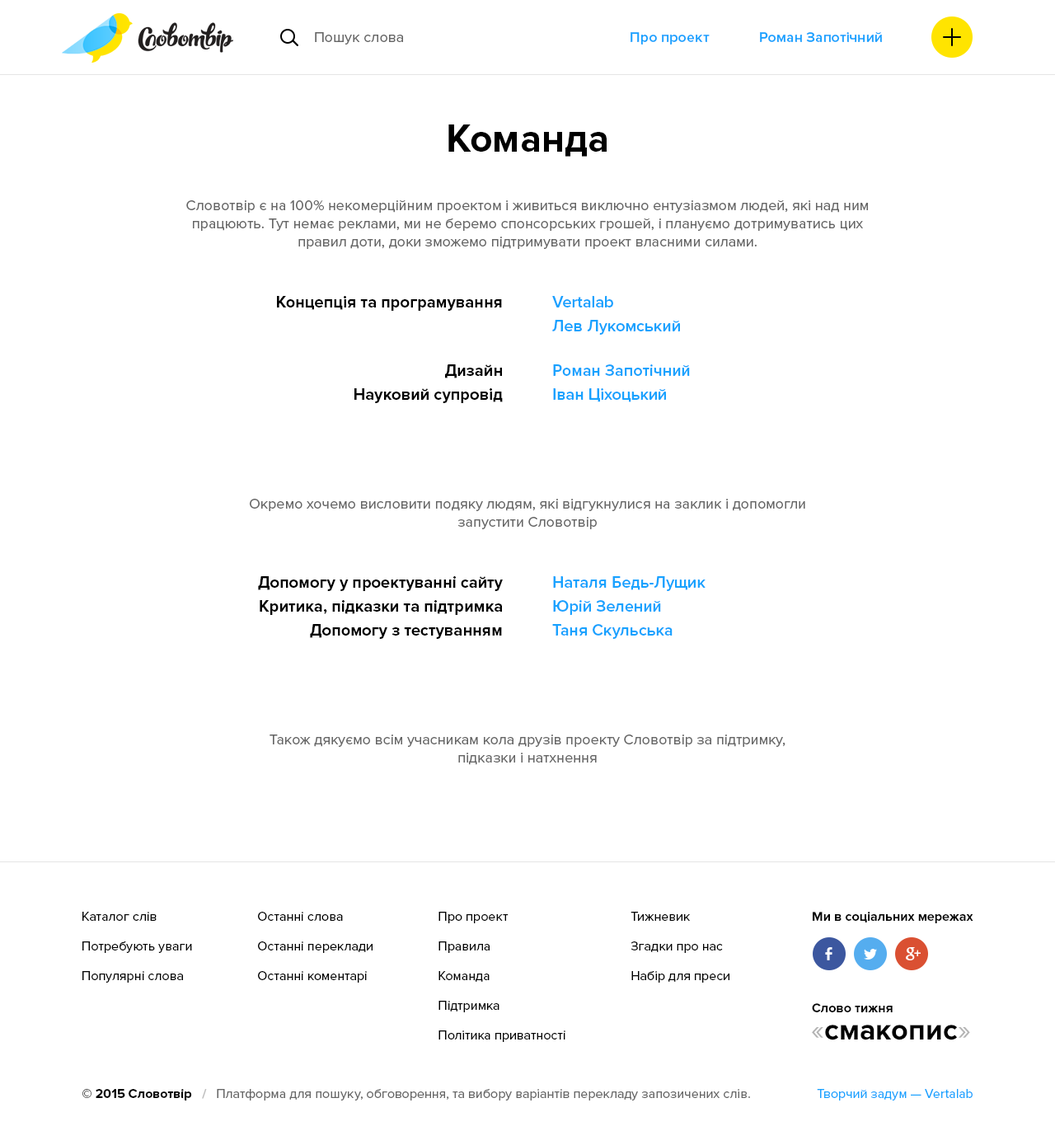
<style>
.page{position:relative;width:1055px;height:1131px;background:#ffffff}
.page>*{position:absolute;margin:0}
.t1{font:14.8px "ProximaNova-Regular";color:#666666}
.t2{font:14.8px "ProximaNova-Semibold";color:#17a2ff}
.t3{font:39.6px "ProximaNova-Bold";color:#000000}
.t4{font:14.8px/18.1px "ProximaNova-Regular";color:#666666}
.t5{font:16.5px "ProximaNova-Bold";color:#000000}
.t6{font:16.5px "ProximaNova-Semibold";color:#17a2ff}
.t7{font:13.2px/29.7px "ProximaNova-Regular";color:#000000}
.t8{font:13.2px/29.7px "ProximaNova-Regular";color:#010101}
.t9{font:13.2px "ProximaNova-Bold";color:#010101}
.t10{font:29.7px "ProximaNova-Bold";color:#000000}
.t11{font:29.7px "ProximaNova-Regular";color:#b3b3b3}
.t12{font:13.2px "ProximaNova-Regular";color:#666666}
.t13{font:13.2px "ProximaNova-Bold";color:#000000}
.t14{font:13.2px "ProximaNova-Bold";color:#bfbfbf}
.t15{font:13.2px "ProximaNova-Regular";color:#17a2ff}
</style>
<div class="page">
<p class="t1" style="left:315px;top:32px;width:88px;height:12px">Пошук слова</p>
<p class="t2" style="left:630px;top:32px;width:79px;height:12px">Про проект</p>
<p class="t2" style="left:760px;top:32px;width:122px;height:10px">Роман Запотічний</p>
<p class="t3" style="left:448px;top:124px;width:158px;height:33px">Команда</p>
<p class="t4" style="left:186px;top:199px;width:682px;height:50px;text-align:center">Словотвір є на 100% некомерційним проектом і живиться виключно ентузіазмом людей, які над ним працюють. Тут немає реклами, ми не беремо спонсорських грошей, і плануємо дотримуватись цих правил доти, доки зможемо підтримувати проект власними силами.</p>
<p class="t5" style="left:277px;top:296px;width:225px;height:15px">Концепція та програмування</p>
<p class="t6" style="left:552px;top:296px;width:61px;height:11px">Vertalab</p>
<p class="t6" style="left:552px;top:320px;width:128px;height:15px">Лев Лукомський</p>
<p class="t5" style="left:445px;top:364px;width:57px;height:14px">Дизайн</p>
<p class="t6" style="left:553px;top:364px;width:137px;height:12px">Роман Запотічний</p>
<p class="t5" style="left:354px;top:388px;width:149px;height:15px">Науковий супровід</p>
<p class="t6" style="left:553px;top:388px;width:113px;height:14px">Іван Ціхоцький</p>
<p class="t4" style="left:250px;top:499px;width:555px;height:30px;text-align:center">Окремо хочемо висловити подяку людям, які відгукнулися на заклик і допомогли<br>запустити Словотвір</p>
<p class="t5" style="left:258px;top:576px;width:245px;height:15px">Допомогу у проектуванні сайту</p>
<p class="t6" style="left:553px;top:576px;width:152px;height:15px">Наталя Бедь-Лущик</p>
<p class="t5" style="left:260px;top:600px;width:242px;height:15px">Критика, підказки та підтримка</p>
<p class="t6" style="left:553px;top:600px;width:108px;height:15px">Юрій Зелений</p>
<p class="t5" style="left:310px;top:624px;width:192px;height:15px">Допомогу з тестуванням</p>
<p class="t6" style="left:552px;top:624px;width:120px;height:15px">Таня Скульська</p>
<p class="t4" style="left:269px;top:734px;width:516px;height:31px;text-align:center">Також дякуємо всім учасникам кола друзів проекту Словотвір за підтримку,<br>підказки і натхнення</p>
<p class="t7" style="left:82px;top:911px;width:110px;height:71px">Каталог слів<br>Потребують уваги<br>Популярні слова</p>
<p class="t7" style="left:258px;top:911px;width:114px;height:71px">Останні слова<br>Останні переклади<br>Останні коментарі</p>
<p class="t7" style="left:438px;top:911px;width:127px;height:131px">Про проект<br>Правила<br>Команда<br>Підтримка<br>Політика приватності</p>
<p class="t8" style="left:630px;top:911px;width:99px;height:71px">Тижневик<br>Згадки про нас<br>Набір для преси</p>
<p class="t9" style="left:812px;top:911px;width:161px;height:12px">Ми в соціальних мережах</p>
<p class="t9" style="left:812px;top:1003px;width:80px;height:9px">Слово тижня</p>
<p class="t10" style="left:812px;top:1024px;width:158px;height:16px"><span class="t11">«</span>смакопис<span class="t11">»</span></p>
<p class="t12" style="left:82px;top:1089px;width:668px;height:11px"><span class="t13">© 2015 Словотвір   </span><span class="t14">/   </span>Платформа для пошуку, обговорення, та вибору варіантів перекладу запозичених слів.</p>
<p class="t15" style="left:817px;top:1089px;width:155px;height:11px">Творчий задум — Vertalab</p>
</div>
